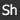
<style>
.page{position:relative;width:20px;height:20px;background:#333333}
.page>*{position:absolute;margin:0}
.t1{font:14px "Tahoma";color:#ffffff}
</style>
<div class="page">
<p class="t1" style="left:2px;top:4px;width:15px;height:12px">Sh</p>
</div>
